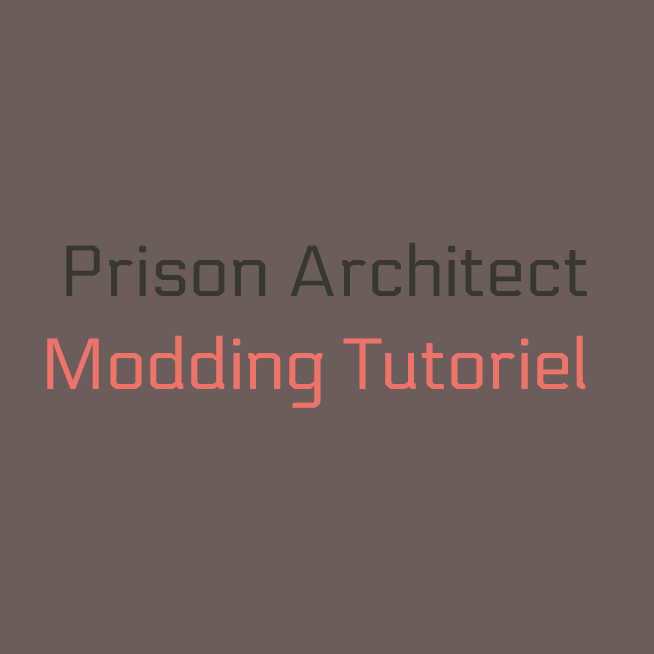
<style>
.page{position:relative;width:654px;height:654px;background:#6b5d5c}
.page>*{position:absolute;margin:0}
.t1{font:72px "Electrolize-Regular";color:#383732}
.t2{font:72px "Electrolize-Regular";color:#ee7469}
</style>
<div class="page">
<p class="t1" style="left:66px;top:242px;width:521px;height:54px">Prison Architect</p>
<p class="t2" style="left:47px;top:335px;width:539px;height:73px">Modding Tutoriel</p>
</div>
